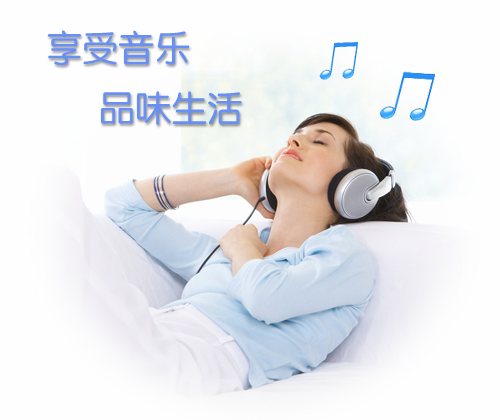
<style>
.page{position:relative;width:500px;height:420px;background:#fefefe}
.page>*{position:absolute;margin:0}
.t1{font:36px "FZY3JW--GB1-0";color:#678ff4}
</style>
<div class="page">
<p class="t1" style="left:47px;top:30px;width:143px;height:36px">享受音乐</p>
<p class="t1" style="left:101px;top:91px;width:141px;height:34px">品味生活</p>
</div>
